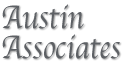
<style>
.page{position:relative;width:125px;height:64px;background:#ffffff}
.page>*{position:absolute;margin:0}
.t1{font:34px/30px "Apple-Chancery";color:#5e6165;scale:0.85 1}
</style>
<div class="page">
<p class="t1" style="left:2px;top:4px;width:118px;height:55px">Austin <br>Associates</p>
</div>
